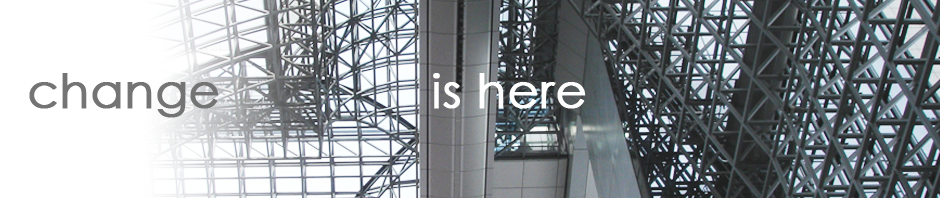
<style>
.page{position:relative;width:940px;height:198px}
.page>*{position:absolute;margin:0}
.t1{font:48px "CenturyGothic";color:#747474;font-weight:bold}
.t2{font:48px "CenturyGothic";color:#fefefe;font-weight:bold}
</style>
<div class="page">
<p class="t1" style="left:29px;top:73px;width:190px;height:45px">change</p>
<p class="t2" style="left:433px;top:73px;width:153px;height:36px">is here</p>
</div>
